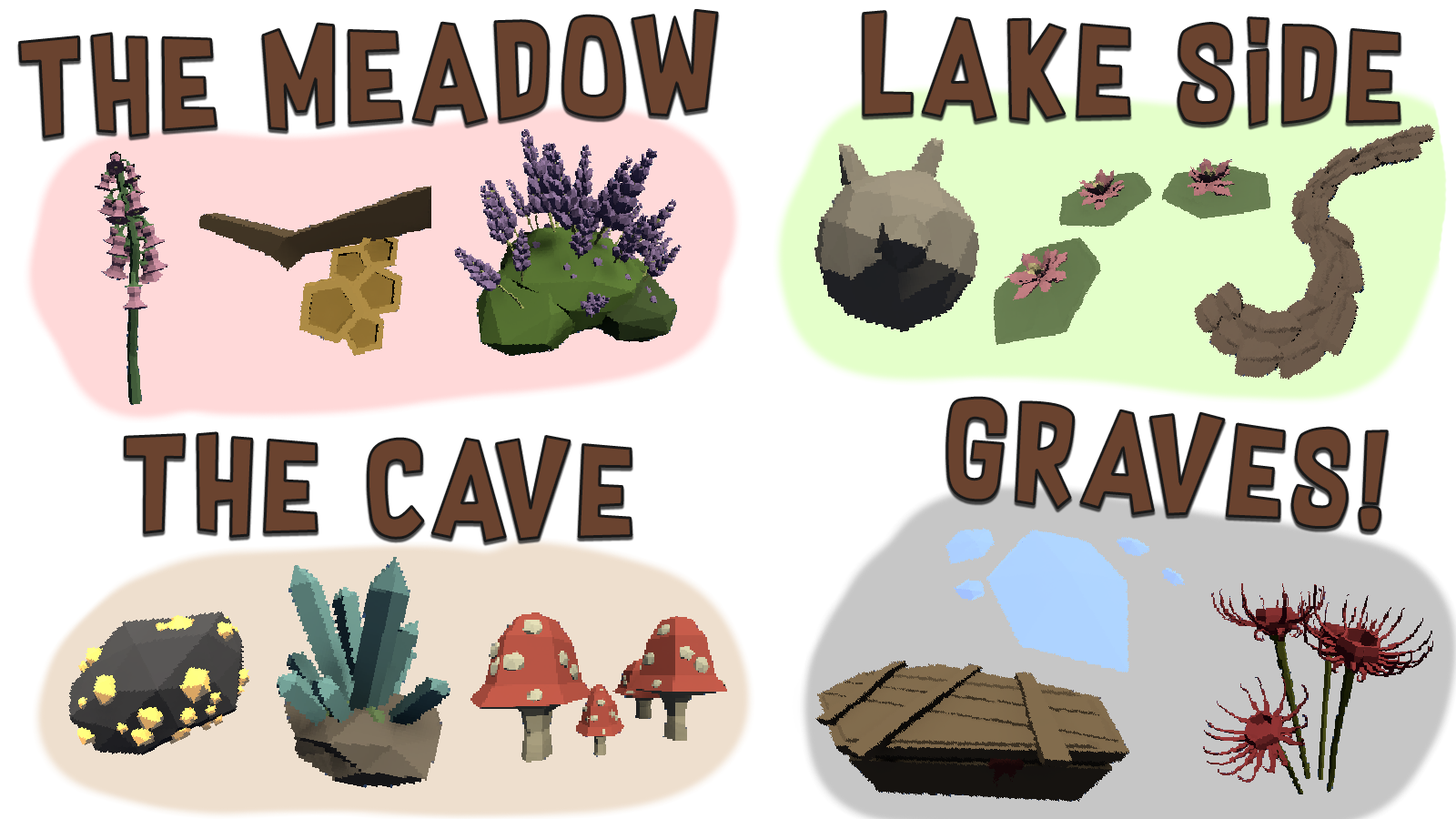
<style>
.page{position:relative;width:1456px;height:819px;background:#ffffff}
.page>*{position:absolute;margin:0}
.t1{font:113.7px "SupersonicRocketship";letter-spacing:0.075em;color:#6a432f}
</style>
<div class="page">
<p class="t1" style="left:19px;top:10px;width:698px;height:127px;rotate:-2deg">the meadow</p>
<p class="t1" style="left:863px;top:11px;width:537px;height:115px;rotate:1deg">lake side</p>
<p class="t1" style="left:947px;top:398px;width:441px;height:133px;rotate:5deg">graves!</p>
<p class="t1" style="left:125px;top:433px;width:507px;height:108px;rotate:1deg">the cave</p>
</div>
